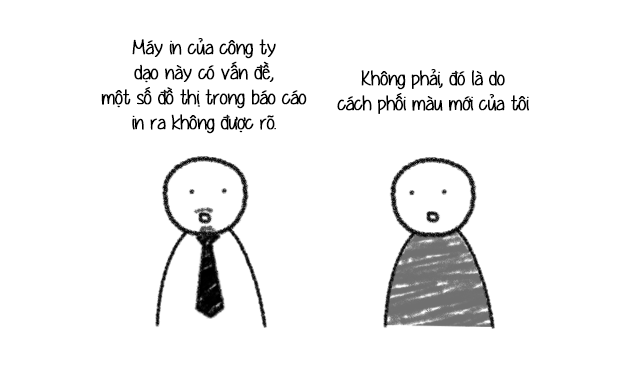
<style>
.page{position:relative;width:617px;height:375px;background:#ffffff}
.page>*{position:absolute;margin:0}
.t1{font:20.8px "UVFYummyCupcakes";letter-spacing:-0.02em;color:#000000;font-weight:bold}
</style>
<div class="page">
<p class="t1" style="left:101px;top:38px;width:206px;height:96px;text-align:center">Máy in của công ty<br>dạo này có vấn đề,<br>một số đồ thị trong báo cáo<br>in ra không được rõ.</p>
<p class="t1" style="left:337px;top:69px;width:192px;height:45px;text-align:center">Không phải, đó là do<br>cách phối màu mới của tôi</p>
</div>
